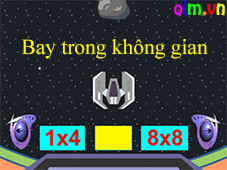
<style>
.page{position:relative;width:227px;height:170px;background:#1b2027}
.page>*{position:absolute;margin:0}
.t1{font:17.1px "VNI-Hobo";color:#ff00f6}
.t2{font:17.1px "VNI-Hobo";color:#2400ff}
.t3{font:17.1px "VNI-Hobo";color:#12ff00}
.t4{font:17.1px "VNI-Hobo";color:#ff9000}
.t5{font:17.1px "VNI-Hobo";color:#ff0000}
.t6{font:17.1px "VNI-Hobo";color:#fcff00}
.t7{font:21.4px "TimesNewRomanPSMT";color:#fff600}
</style>
<div class="page">
<p class="t1" style="left:174px;top:0px;width:51px;height:16px">o<span class="t2">l</span><span class="t3">m</span><span class="t4">.</span><span class="t5">v</span><span class="t6">n</span></p>
<p class="t7" style="left:21px;top:39px;width:187px;height:20px">Bay trong không gian</p>
</div>
